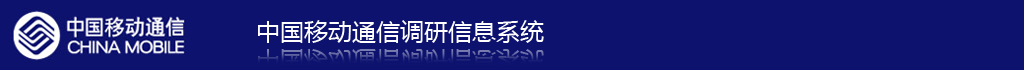
<style>
.page{position:relative;width:1024px;height:70px;background:#0d126e}
.page>*{position:absolute;margin:0}
.t1{font:24px "MicrosoftYaHei";color:#fefefe}
</style>
<div class="page">
<p class="t1" style="left:258px;top:20px;width:286px;height:23px">中国移动通信调研信息系统</p>
</div>
